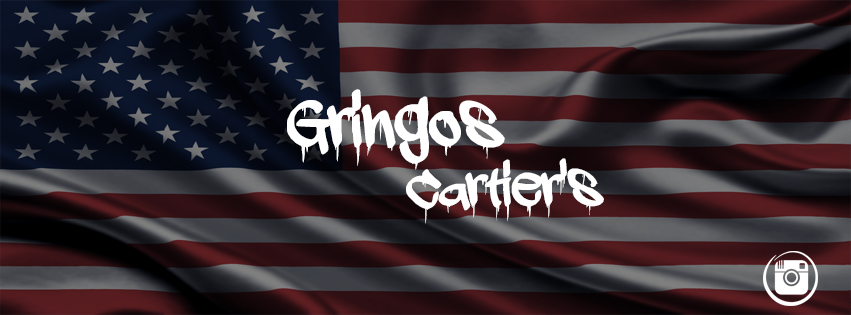
<style>
.page{position:relative;width:851px;height:315px}
.page>*{position:absolute;margin:0}
.t1{font:89.5px "adrippingmarker";color:#ffffff}
.t2{font:72px "adrippingmarker";color:#ffffff}
</style>
<div class="page">
<p class="t1" style="left:287px;top:89px;width:218px;height:81px">Gringos</p>
<p class="t2" style="left:406px;top:158px;width:198px;height:66px">Cartier's</p>
</div>
